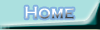
<style>
.page{position:relative;width:100px;height:30px;background:#abe0df}
.page>*{position:absolute;margin:0}
.t1{font:16.7px "CopperplateGothic-Light";letter-spacing:-0.01em;font-weight:bold}
</style>
<div class="page">
<p class="t1" style="left:25px;top:6px;width:49px;height:13px">Home</p>
</div>
